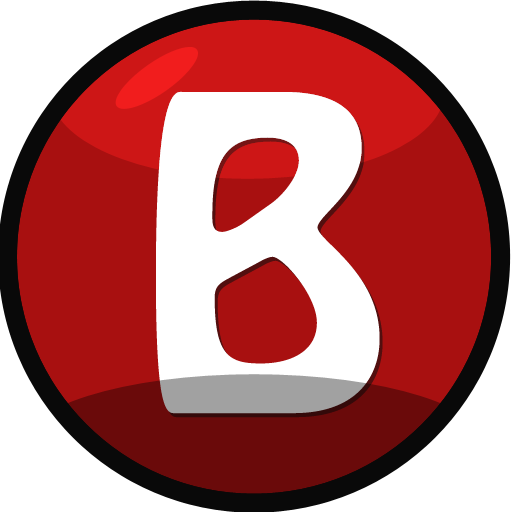
<style>
.page{position:relative;width:512px;height:512px;background:#ffffff}
.page>*{position:absolute;margin:0}
.t1{font:385.8px "HoboStd";color:#ffffff}
</style>
<div class="page">
<p class="t1" style="left:156px;top:91px;width:224px;height:323px">B</p>
<p class="t1" style="left:159px;top:95px;width:224px;height:323px">B</p>
</div>
